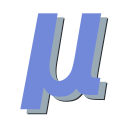
<style>
.page{position:relative;width:128px;height:128px;background:#ffffff}
.page>*{position:absolute;margin:0}
.t1{font:166.7px "RixSheepCloudB";color:#7289da}
.t2{font:166.7px "RixSheepCloudB"}
</style>
<div class="page">
<p class="t1" style="left:20px;top:13px;width:82px;height:97px">μ</p>
<p class="t2" style="left:26px;top:17px;width:82px;height:97px">μ</p>
<p class="t2" style="left:27px;top:18px;width:82px;height:97px">μ</p>
</div>
